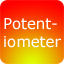
<style>
.page{position:relative;width:64px;height:64px}
.page>*{position:absolute;margin:0}
.t1{font:14.9px "Verdana";color:#ffffff}
</style>
<div class="page">
<p class="t1" style="left:4px;top:18px;width:57px;height:30px">Potent-<br>iometer</p>
</div>
